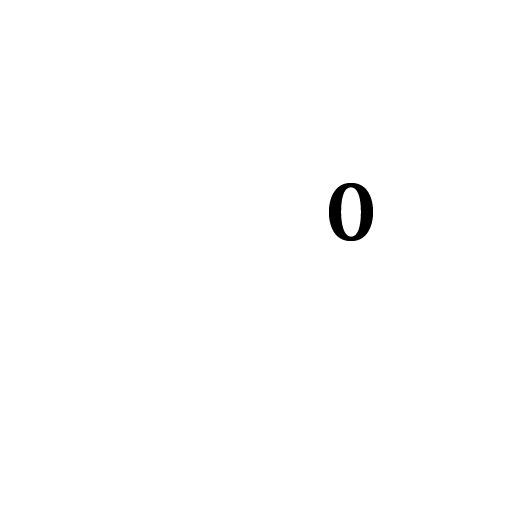
<style>
.page{position:relative;width:512px;height:512px;background:#ffffff}
.page>*{position:absolute;margin:0}
.t1{font:112px "AdobeGurmukhi-Bold";color:#000000}
</style>
<div class="page">
<p class="t1" style="left:329px;top:183px;width:44px;height:58px">0</p>
</div>
